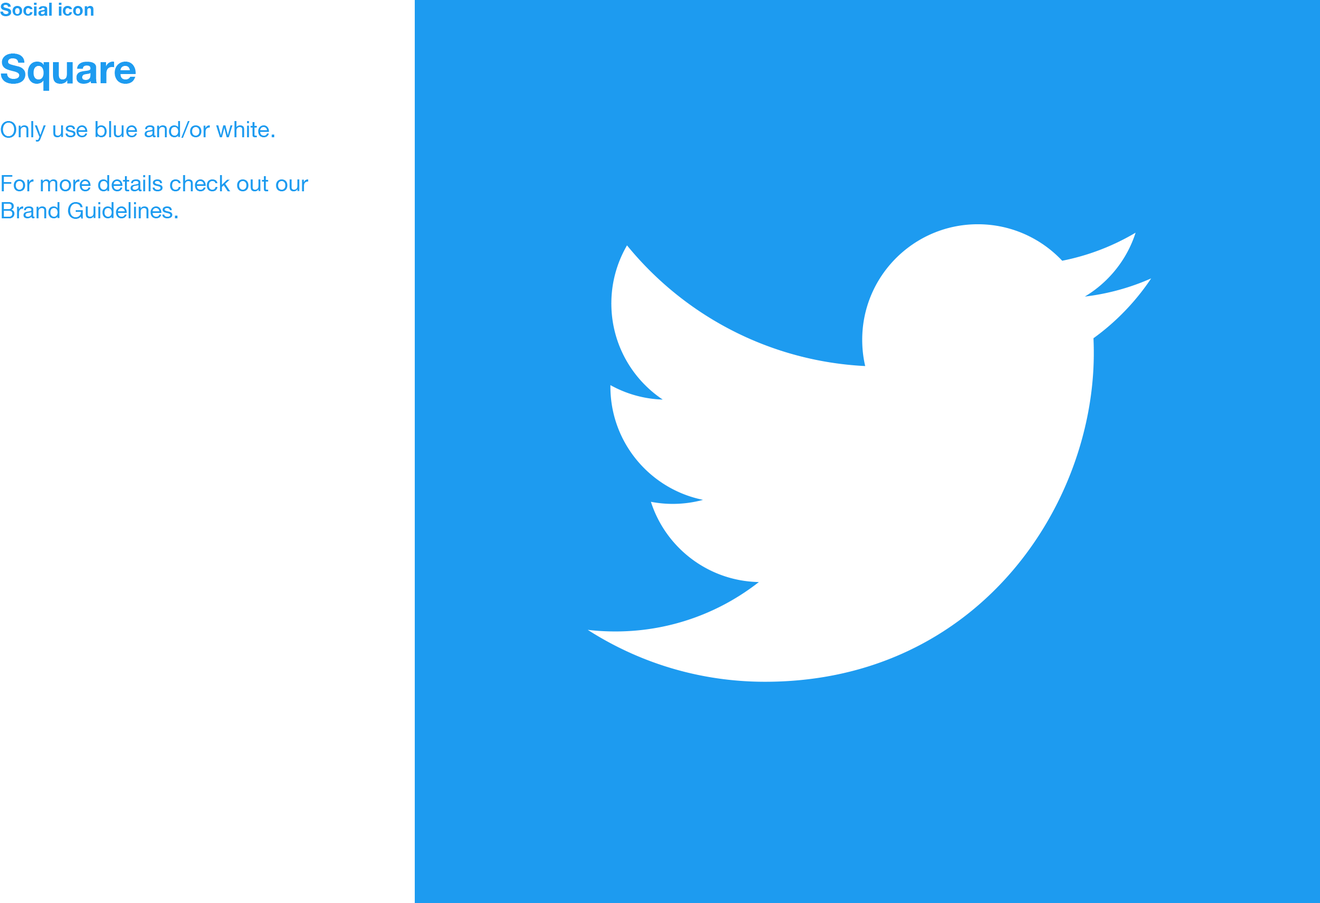
<style>
.page{position:relative;width:1320px;height:903px;background:#1d9bf0}
.page>*{position:absolute;margin:0}
.t1{font:22.5px "HelveticaNeue";color:#1d9bf0}
.t2{font:18px/40.6px "HelveticaNeue-Bold";color:#1d9bf0}
.t3{font:40.6px/40.6px "HelveticaNeue-Bold";color:#1d9bf0}
</style>
<div class="page">
<p class="t1" style="left:0px;top:3px;width:308px;height:216px"><span class="t2">Social icon<br><br></span><span class="t3">Square<br></span><br>Only use blue and/or white.<br><br>For more details check out our<br>Brand Guidelines.</p>
</div>
